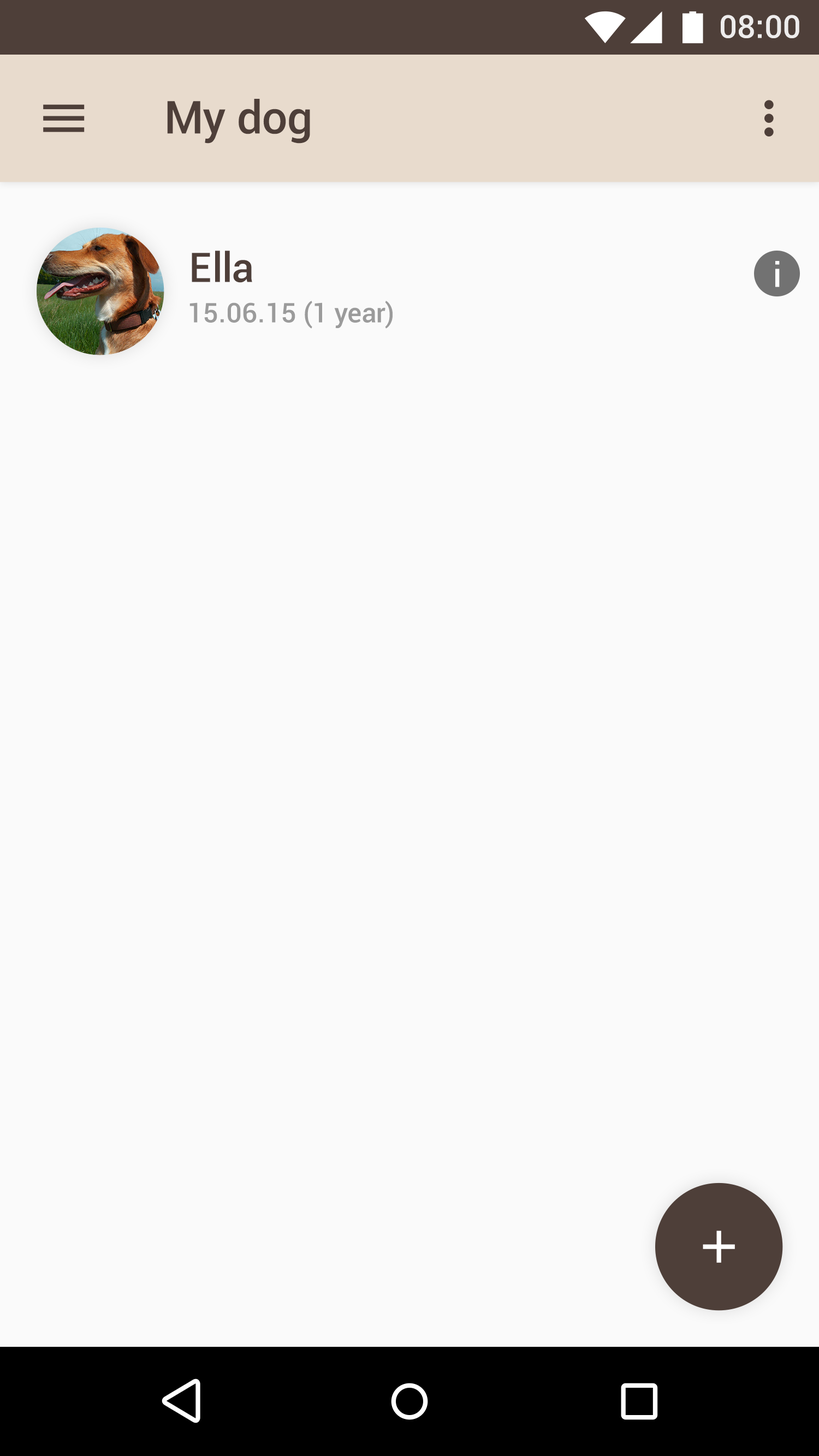
<style>
.page{position:relative;width:819px;height:1456px;background:#fafafa}
.page>*{position:absolute;margin:0}
.t1{font:31.9px "Roboto-Medium";color:#eeecec}
.t2{font:45.5px "Roboto-Medium";color:#4e3f39}
.t3{font:40.9px "Roboto-Medium";color:#4e3f39}
.t4{font:34.1px "Roboto-Medium";color:#ffffff}
.t5{font:27.1px "Roboto-Medium";color:#9b9b9b}
</style>
<div class="page">
<p class="t1" style="left:721px;top:15px;width:78px;height:23px">08:00</p>
<p class="t2" style="left:167px;top:99px;width:143px;height:45px">My dog</p>
<p class="t3" style="left:192px;top:251px;width:60px;height:32px">Ella</p>
<p class="t4" style="left:775px;top:261px;width:5px;height:26px">i</p>
<p class="t5" style="left:189px;top:301px;width:204px;height:28px">15.06.15 (1 year)</p>
</div>
